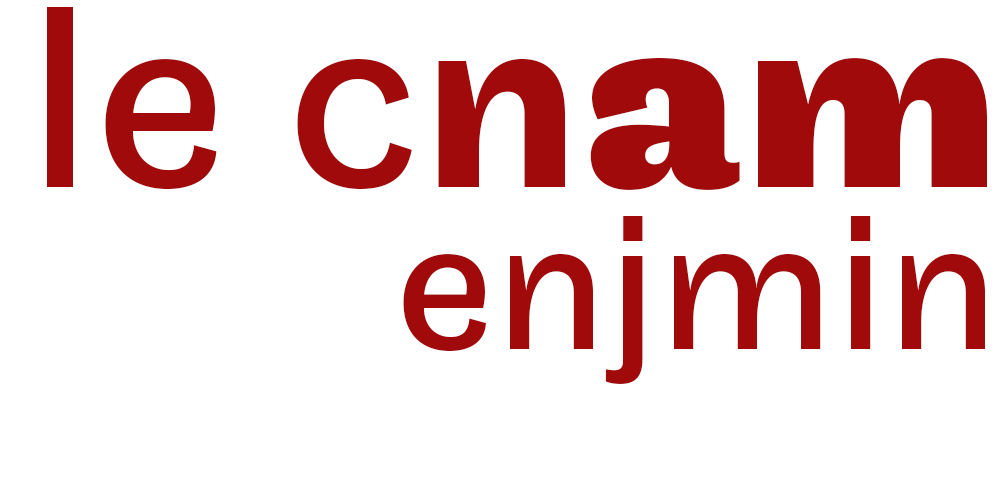
<style>
.page{position:relative;width:1000px;height:500px;background:#ffffff}
.page>*{position:absolute;margin:0}
.t1{font:270px "Maple-Regular";color:#a10a0a}
.t2{font:270px "Maple-Medium";color:#a10a0a}
.t3{font:270px "Maple-Bold";color:#a10a0a}
.t4{font:200px "Maple-Regular";color:#a10a0a}
</style>
<div class="page">
<p class="t1" style="left:47px;top:7px;width:940px;height:183px">le c<span class="t2">n</span><span class="t3">am</span></p>
<p class="t4" style="left:403px;top:216px;width:582px;height:168px">enjmin</p>
</div>
